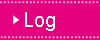
<style>
.page{position:relative;width:100px;height:40px;background:#e4007f}
.page>*{position:absolute;margin:0}
.t1{font:20px "ArialMT";color:#ffffff}
</style>
<div class="page">
<p class="t1" style="left:25px;top:12px;width:30px;height:19px">Log</p>
</div>
